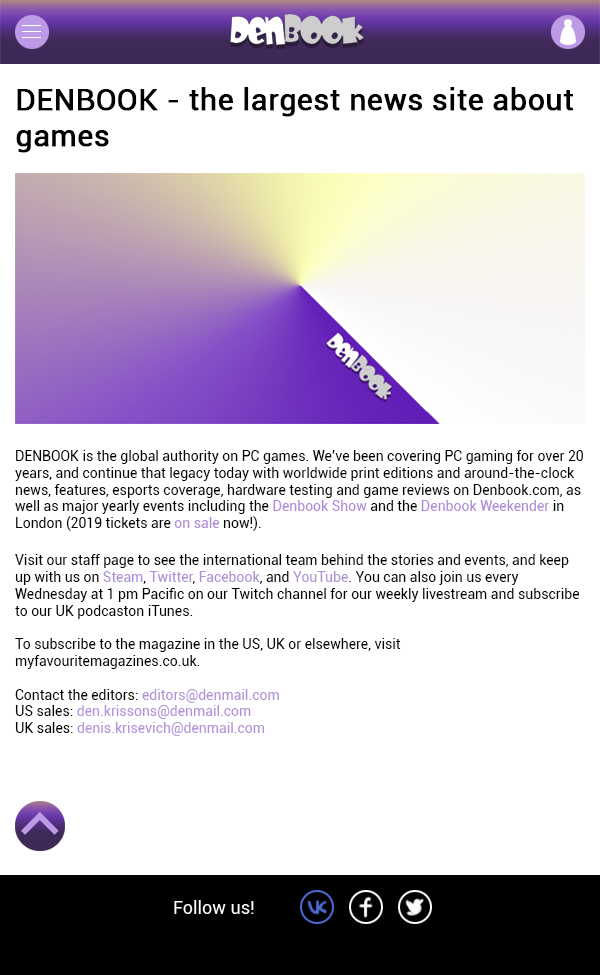
<style>
.page{position:relative;width:600px;height:975px;background:#ffffff}
.page>*{position:absolute;margin:0}
.t1{font:30px "Roboto-Regular";color:#000000;font-weight:bold}
.t2{font:14px "Roboto-Regular";color:#000000}
.t3{font:14px "Roboto-Regular";color:#ae8cd7}
.t4{font:14px "Roboto-Regular";color:#ad8cd6}
.t5{font:14px "Roboto-Regular";color:#ae8ed6}
.t6{font:14px "Roboto-Regular";color:#af8fd6}
.t7{font:14px "Roboto-Regular";color:#af8fd7}
.t8{font:14px "Roboto-Regular";color:#b090d7}
.t9{font:14px "Roboto-Regular";color:#b192d9}
.t10{font:14px "Roboto-Regular";color:#b292da}
</style>
<div class="page">
<p class="t1" style="left:16px;top:87px;width:558px;height:66px">DENBOOK - the largest news site about <br>games</p>
<p class="t2" style="left:15px;top:450px;width:568px;height:81px">DENBOOK is the global authority on PC games. We’ve been covering PC gaming for over 20 <br>years, and continue that legacy today with worldwide print editions and around-the-clock <br>news, features, esports coverage, hardware testing and game reviews on Denbook.com, as<br>well as major yearly events including the <span class="t3">Denbook Show</span> and the <span class="t3">Denbook Weekender</span> in <br>London (2019 tickets are <span class="t4">on sale </span>now!).</p>
<p class="t2" style="left:15px;top:554px;width:565px;height:182px">Visit our staff page to see the international team behind the stories and events, and keep <br>up with us on <span class="t5">Steam</span>, <span class="t6">Twitter</span>, <span class="t7">Facebook</span>, and <span class="t8">YouTube</span>. You can also join us every <br>Wednesday at 1 pm Pacific on our Twitch channel for our weekly livestream and subscribe <br>to our UK podcaston iTunes.<br><br>To subscribe to the magazine in the US, UK or elsewhere, visit <br>myfavouritemagazines.co.uk.<br><br>Contact the editors: <span class="t9">editors@denmail.com<br></span>US sales: <span class="t10">den.krissons@denmail.com<br></span>UK sales: <span class="t10">denis.krisevich@denmail.com</span></p>
</div>
